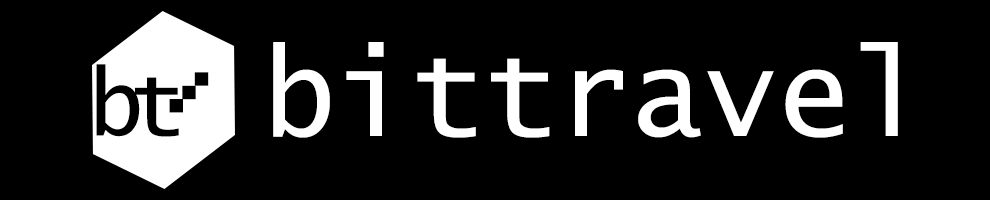
<style>
.page{position:relative;width:990px;height:200px;background:#000000}
.page>*{position:absolute;margin:0}
.t1{font:121.9px "LucidaConsole";color:#ffffff}
.t2{font:91.4px "LucidaConsole";color:#000000}
</style>
<div class="page">
<p class="t1" style="left:273px;top:42px;width:625px;height:96px">bittravel</p>
<p class="t2" style="left:96px;top:64px;width:44px;height:73px">b</p>
<p class="t2" style="left:135px;top:77px;width:44px;height:60px">t</p>
<p class="t2" style="left:194px;top:72px;width:15px;height:14px">.</p>
<p class="t2" style="left:182px;top:85px;width:14px;height:15px">.</p>
<p class="t2" style="left:169px;top:99px;width:14px;height:14px">.</p>
</div>
